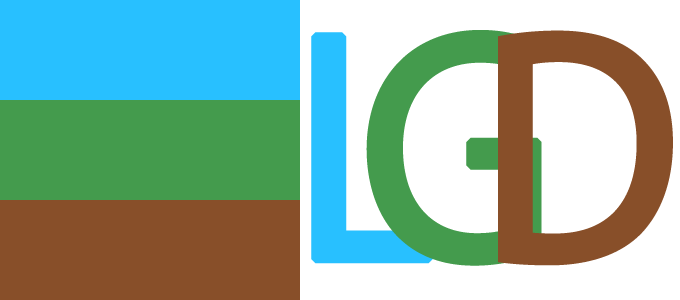
<style>
.page{position:relative;width:680px;height:300px;background:#ffffff}
.page>*{position:absolute;margin:0}
.t1{font:330px "MyriadPro-Regular";letter-spacing:-0.275em;color:#28c0ff;font-weight:bold;scale:0.91 1}
.t2{font:330px "MyriadPro-Regular";letter-spacing:-0.275em;color:#449b4d;font-weight:bold;scale:0.91 1}
.t3{font:330px "MyriadPro-Regular";letter-spacing:-0.275em;color:#884f29;font-weight:bold;scale:0.91 1}
</style>
<div class="page">
<p class="t1" style="left:311px;top:30px;width:362px;height:236px">L<span class="t2">G</span><span class="t3">D</span></p>
</div>
